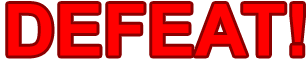
<style>
.page{position:relative;width:306px;height:59px;background:#ff0000}
.page>*{position:absolute;margin:0}
.t1{font:72px "Arial-BoldMT";color:#ff0000}
</style>
<div class="page">
<p class="t1" style="left:8px;top:4px;width:295px;height:52px">DEFEAT!</p>
</div>
